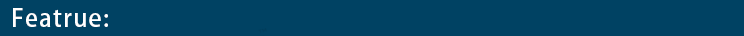
<style>
.page{position:relative;width:744px;height:36px;background:#004263}
.page>*{position:absolute;margin:0}
.t1{font:24px "AdobeHeitiStd-Regular";letter-spacing:0.05em;color:#ffffff}
</style>
<div class="page">
<p class="t1" style="left:13px;top:8px;width:95px;height:19px">Featrue:</p>
</div>
